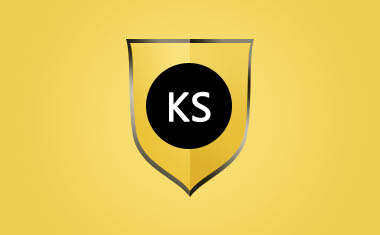
<style>
.page{position:relative;width:380px;height:235px}
.page>*{position:absolute;margin:0}
.t1{font:40px "Gadugi";letter-spacing:0.005em;color:#ffffff;font-weight:bold}
</style>
<div class="page">
<p class="t1" style="left:169px;top:91px;width:42px;height:32px">KS</p>
</div>
